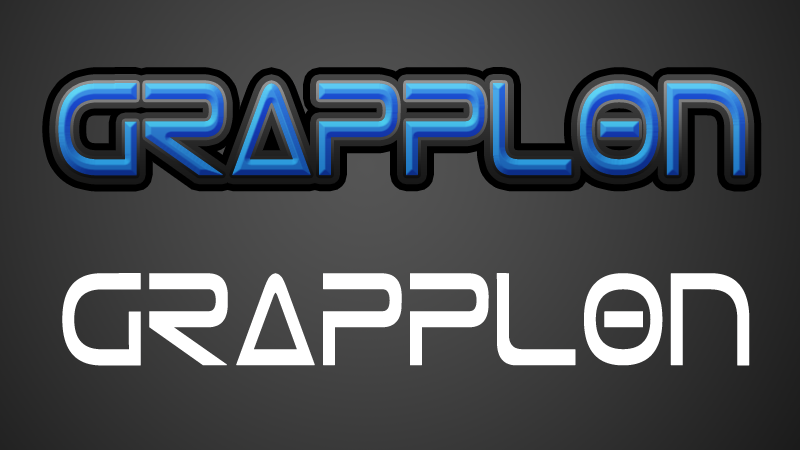
<style>
.page{position:relative;width:800px;height:450px}
.page>*{position:absolute;margin:0}
.t1{font:117.8px "Tele-Marines";letter-spacing:-0.02em;color:#ffffff;font-weight:bold;scale:0.73 1}
</style>
<div class="page">
<p class="t1" style="left:62px;top:273px;width:688px;height:93px">GrapplOn</p>
</div>
